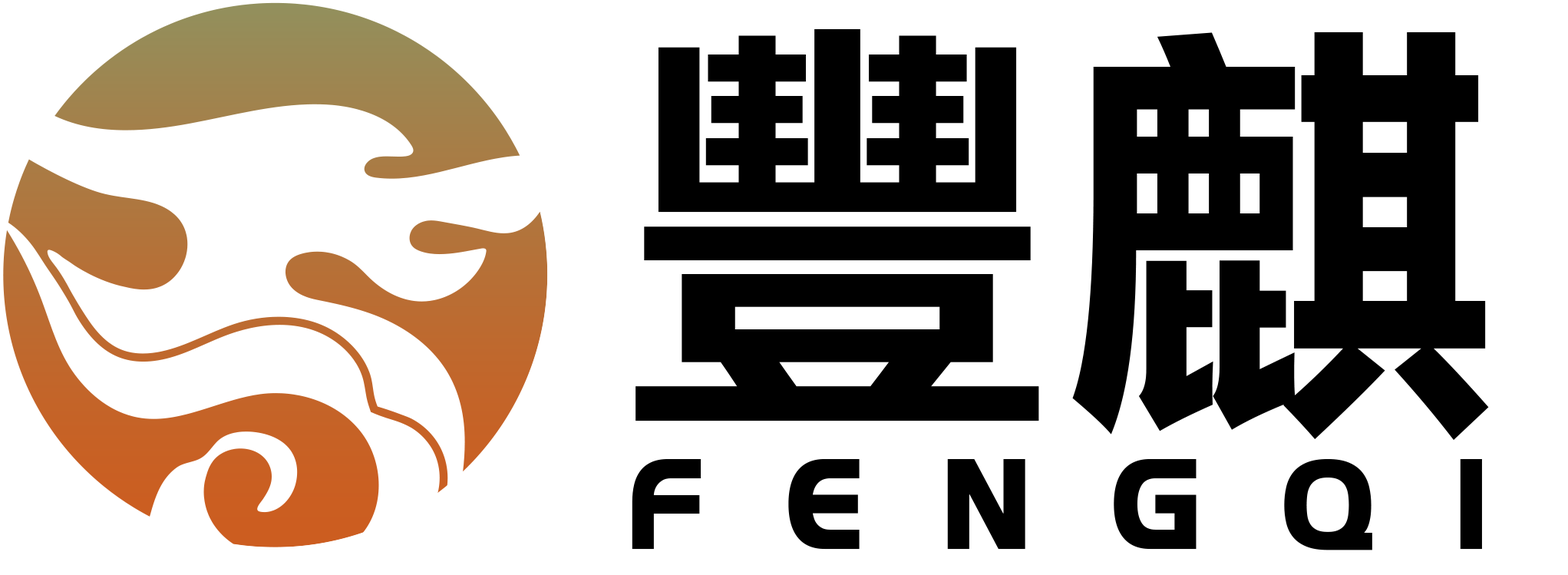
<style>
.page{position:relative;width:1568px;height:575px;background:#ffffff}
.page>*{position:absolute;margin:0}
.t1{font:418.9px "MicrosoftYaHei-Bold";letter-spacing:0.059em;color:#000000}
.t2{font:115.1px "HighlandGothicFLF-Bold";letter-spacing:0.724em;color:#000000}
</style>
<div class="page">
<p class="t1" style="left:635px;top:29px;width:854px;height:411px">豐麒</p>
<p class="t2" style="left:632px;top:459px;width:850px;height:91px">FENGQI</p>
</div>
